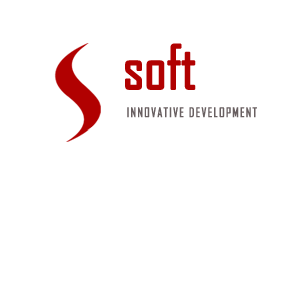
<style>
.page{position:relative;width:300px;height:300px;background:#ffffff}
.page>*{position:absolute;margin:0}
.t1{font:58.3px "AgencyFB-Reg";letter-spacing:-0.02em;color:#b10101;font-weight:bold}
.t2{font:58.3px "AgencyFB-Reg";letter-spacing:-0.02em;color:#ffffff;font-weight:bold}
.t3{font:12.5px "AgencyFB-Reg";letter-spacing:0.08em;color:#696061;font-weight:bold}
</style>
<div class="page">
<p class="t1" style="left:125px;top:43px;width:133px;height:58px">soft<span class="t2">sys</span></p>
<p class="t3" style="left:127px;top:107px;width:130px;height:11px">INNOVATIVE DEVELOPMENT</p>
</div>
